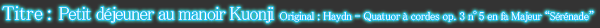
<style>
.page{position:relative;width:600px;height:28px;background:#333333}
.page>*{position:absolute;margin:0}
.t1{font:11.2px "MS-PMincho";letter-spacing:-0.025em;color:#ffffff}
.t2{font:20px "MS-PMincho";color:#ffffff}
.t3{font:18.7px "MS-PMincho";letter-spacing:-0.05em;color:#ffffff}
.t4{font:11.2px "MS-PMincho";letter-spacing:-0.5em;color:#ffffff}
</style>
<div class="page">
<p class="t1" style="left:2px;top:6px;width:592px;height:17px"><span class="t2">Titre : </span><span class="t3">Petit déjeuner au manoir Kuonji </span>Original : Haydn - Quatuor à cordes op. 3 n<span class="t4">°</span>5 en fa Majeur “Sérénade”</p>
</div>
